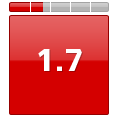
<style>
.page{position:relative;width:117px;height:117px;background:#d40000}
.page>*{position:absolute;margin:0}
.t1{font:36px "Colaborate-Bold";color:#ffffff;text-transform:uppercase}
</style>
<div class="page">
<p class="t1" style="left:38px;top:49px;width:44px;height:22px">1.7</p>
</div>
